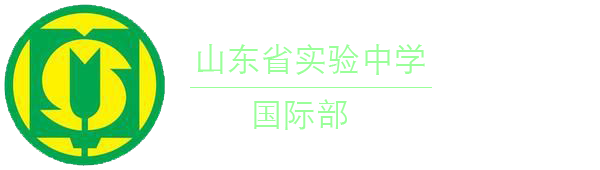
<style>
.page{position:relative;width:600px;height:170px;background:#ffffff}
.page>*{position:absolute;margin:0}
.t1{font:33.3px "STHeitiSC-Light";color:#99ff99}
</style>
<div class="page">
<p class="t1" style="left:197px;top:44px;width:228px;height:31px">山东省实验中学</p>
<p class="t1" style="left:254px;top:99px;width:93px;height:31px">国际部</p>
</div>
